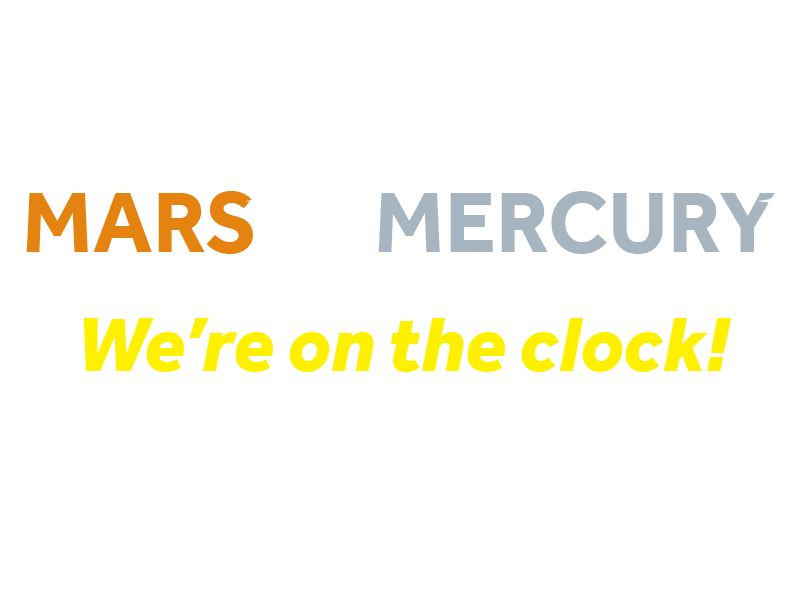
<style>
.page{position:relative;width:800px;height:600px;background:#ffffff}
.page>*{position:absolute;margin:0}
.t1{font:88.4px "Effra-Bold";color:#a7b5c1}
.t2{font:88.4px "Effra-Bold";color:#e48310}
.t3{font:88.4px "Effra-Bold";color:#ffffff}
.t4{font:80.2px "Effra-HeavyItalic";color:#fff000}
</style>
<div class="page">
<p class="t1" style="left:26px;top:191px;width:749px;height:63px"><span class="t2">MARS</span><span class="t3"> or </span>MERCURY</p>
<p class="t4" style="left:83px;top:318px;width:649px;height:54px">We’re on the clock!</p>
</div>
